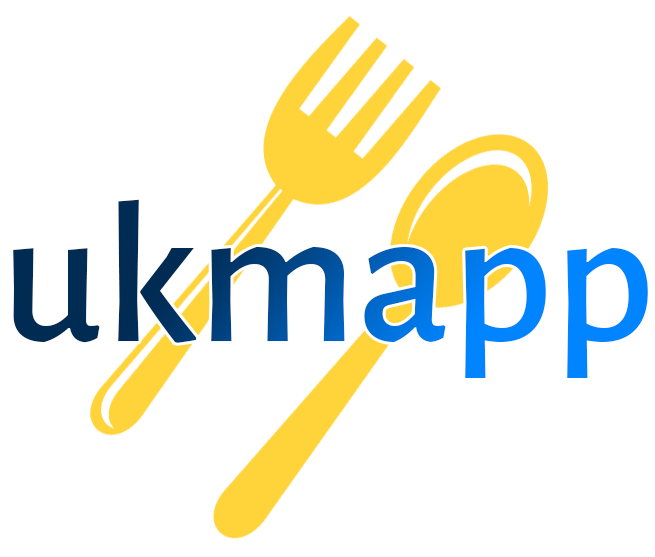
<style>
.page{position:relative;width:655px;height:557px;background:#ffffff}
.page>*{position:absolute;margin:0}
.t1{font:200px "AlegreyaSans-Medium"}
</style>
<div class="page">
<p class="t1" style="left:13px;top:199px;width:635px;height:179px">ukmapp</p>
</div>
